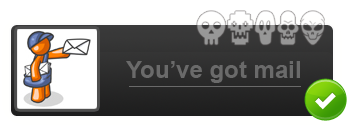
<style>
.page{position:relative;width:350px;height:140px;background:#ffffff}
.page>*{position:absolute;margin:0}
.t1{font:24px "Arial-BoldMT";color:#6a6a6a}
</style>
<div class="page">
<p class="t1" style="left:126px;top:61px;width:174px;height:22px">You’ve got mail</p>
</div>
